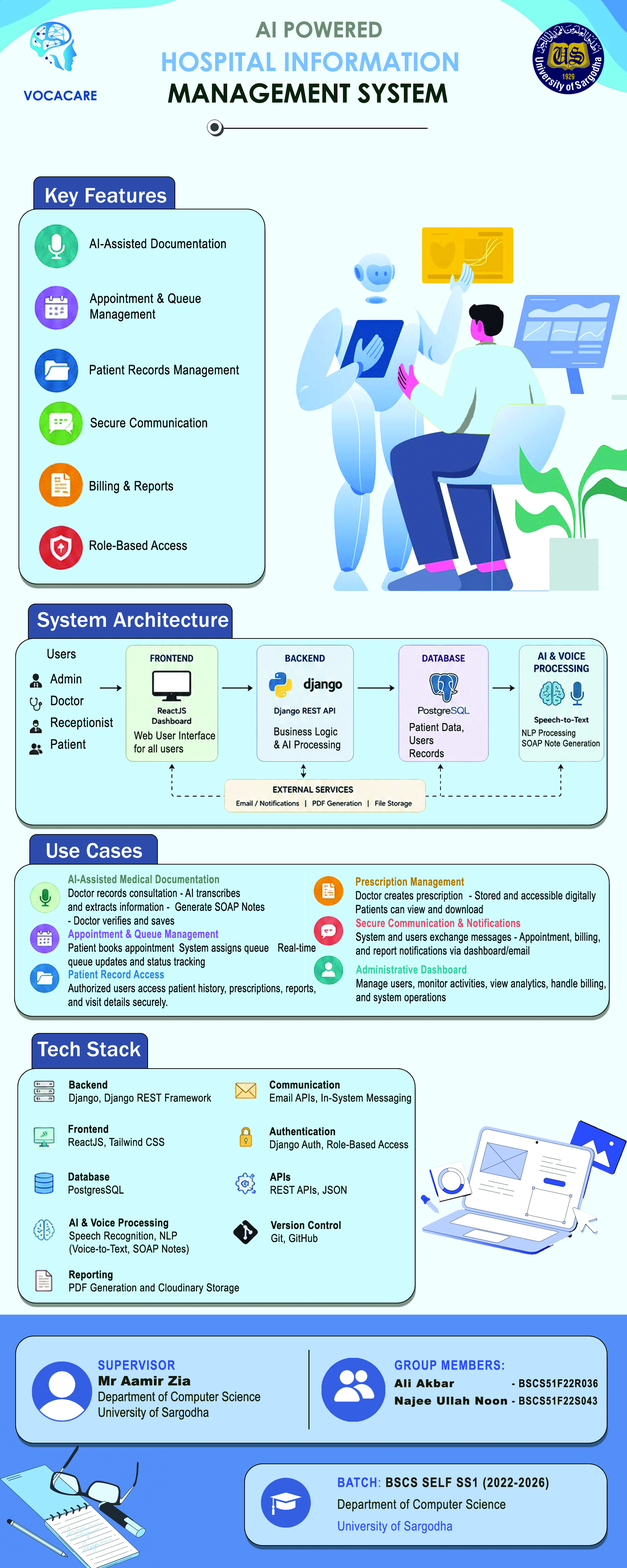
<style>
.page{position:relative;width:627px;height:1568px;background:#f2ffff}
.page>*{position:absolute;margin:0}
.t1{font:21.8px "CenturyGothic-Bold";letter-spacing:-0.006em;color:#6d8c76;font-variant:small-caps}
.t2{font:26.1px "CenturyGothic-Bold";letter-spacing:-0.006em;color:#7ac2ff;font-variant:small-caps}
.t3{font:26.1px "CenturyGothic-Bold";letter-spacing:-0.006em;color:#09200c;font-variant:small-caps}
.t4{font:13.1px "CenturyGothic-Bold";letter-spacing:-0.006em;color:#0a40cb;font-variant:small-caps}
.t5{font:21.8px "FranklinGothic-Medium";letter-spacing:0.01em;color:#f4feff}
.t6{font:13.1px "ArialNarrow";letter-spacing:0.025em;color:#060808}
.t7{font:13.1px/21.8px "ArialNarrow";letter-spacing:0.025em;color:#060808}
.t8{font:10.9px "ArialNarrow";letter-spacing:0.025em;color:#0a100b}
.t9{font:8.7px "ArialNarrow";letter-spacing:0.025em;color:#0a100b}
.t10{font:11.5px "ArialNarrow";letter-spacing:0.025em;color:#060808;scale:0.89 1}
.t11{font:11.5px "ArialNarrow-Bold";letter-spacing:0.025em;color:#518a5f;scale:0.89 1}
.t12{font:11.5px "ArialNarrow";letter-spacing:0.025em;color:#070b0c;scale:0.89 1}
.t13{font:11.5px "ArialNarrow-Bold";letter-spacing:0.025em;color:#ae7900;scale:0.89 1}
.t14{font:11.5px "ArialNarrow-Bold";letter-spacing:0.025em;color:#7c50ff;scale:0.89 1}
.t15{font:11.5px "ArialNarrow-Bold";letter-spacing:0.025em;color:#e94a69;scale:0.89 1}
.t16{font:11.5px "ArialNarrow-Bold";letter-spacing:0.025em;color:#34d09f;scale:0.89 1}
.t17{font:11.5px "ArialNarrow-Bold";letter-spacing:0.025em;color:#2b89e2;scale:0.89 1}
.t18{font:10.9px/13.1px "ArialNarrow";letter-spacing:0.025em;color:#0a100b}
.t19{font:10.9px/13.1px "ArialNarrow-Bold";letter-spacing:0.025em;color:#0a100b}
.t20{font:13.1px "ArialNarrow";letter-spacing:0.01em;color:#141b0c}
.t21{font:13.1px "ArialNarrow-Bold";letter-spacing:0.06em;color:#2a4cff;text-transform:uppercase}
.t22{font:13.1px "Arial-Black";letter-spacing:0.01em;color:#141b0c}
.t23{font:10.9px/17.4px "Arial-Black";letter-spacing:0.06em;color:#17180c}
.t24{font:13.1px/17.4px "ArialNarrow-Bold";letter-spacing:0.06em;color:#2a4bff;text-transform:uppercase}
.t25{font:10.9px/17.4px "ArialNarrow-Bold";letter-spacing:0.06em;color:#17180c}
.t26{font:10.9px/17.4px "ArialNarrow-Bold";letter-spacing:0.06em;color:#10110c}
.t27{font:13.1px/21.8px "ArialNarrow";letter-spacing:0.025em;color:#141b0c}
.t28{font:13.1px "ArialNarrow-Bold";letter-spacing:0.06em;color:#2a4bff;text-transform:uppercase}
.t29{font:13.1px "ArialNarrow";letter-spacing:0.06em;color:#2a4bff;text-transform:uppercase}
.t30{font:13.1px "ArialNarrow-Bold";letter-spacing:0.06em;color:#17180c;text-transform:uppercase}
.t31{font:13.1px/21.8px "ArialNarrow";letter-spacing:0.025em;color:#2a4bff}
</style>
<div class="page">
<p class="t1" style="left:256px;top:21px;width:126px;height:17px">AI POWERED</p>
<p class="t2" style="left:162px;top:52px;width:296px;height:51px">HOSPITAL INFORMATION<br><span class="t3"> MANAGEMENT SYSTEM</span></p>
<p class="t4" style="left:24px;top:90px;width:73px;height:11px">VOCACARE</p>
<p class="t5" style="left:46px;top:188px;width:121px;height:19px">Key Features</p>
<p class="t6" style="left:89px;top:238px;width:137px;height:10px">AI-Assisted Documentation</p>
<p class="t6" style="left:90px;top:293px;width:111px;height:29px">Appointment &amp; Queue<br>Management</p>
<p class="t6" style="left:90px;top:365px;width:149px;height:12px">Patient Records Management</p>
<p class="t6" style="left:90px;top:417px;width:117px;height:11px">Secure Communication</p>
<p class="t6" style="left:90px;top:481px;width:83px;height:12px">Billing &amp; Reports</p>
<p class="t6" style="left:90px;top:540px;width:97px;height:10px">Role-Based Access</p>
<p class="t5" style="left:37px;top:612px;width:191px;height:19px">System Architecture</p>
<p class="t6" style="left:48px;top:649px;width:28px;height:10px">Users</p>
<p class="t7" style="left:50px;top:674px;width:63px;height:75px">Admin<br>Doctor<br>Receptionist<br>Patient</p>
<p class="t8" style="left:410px;top:723px;width:54px;height:35px">Patient Data, <br>Users<br>Records</p>
<p class="t8" style="left:134px;top:731px;width:81px;height:22px">Web User Interface <br>for all users</p>
<p class="t8" style="left:274px;top:727px;width:66px;height:24px">Business Logic <br>&amp; AI Processing</p>
<p class="t9" style="left:522px;top:730px;width:78px;height:17px">NLP Processing <br>SOAP Note Generation</p>
<p class="t5" style="left:47px;top:843px;width:95px;height:15px">Use Cases</p>
<p class="t10" style="left:68px;top:875px;width:197px;height:50px"><span class="t11">AI-Assisted Medical Documentation<br></span>Doctor records consultation - AI transcribes <br>and extracts information -  Generate SOAP Notes <br>- Doctor verifies and saves</p>
<p class="t12" style="left:356px;top:877px;width:240px;height:37px"><span class="t13">Prescription Management<br></span>Doctor creates prescription  - Stored and accessible digitally<br>Patients can view and download</p>
<p class="t10" style="left:68px;top:929px;width:248px;height:39px"><span class="t14">Appointment &amp; Queue Management<br></span>Patient books appointment System assigns queue Real-time<br>queue updates and status tracking</p>
<p class="t10" style="left:356px;top:918px;width:244px;height:39px"><span class="t15">Secure Communication &amp; Notifications<br></span>System and users exchange messages - Appointment, billing,<br>and report notifications via dashboard/email</p>
<p class="t10" style="left:356px;top:965px;width:250px;height:39px"><span class="t16">Administrative Dashboard<br></span>Manage users, monitor activities, view analytics, handle billing,<br>and system operations</p>
<p class="t10" style="left:68px;top:970px;width:247px;height:38px"><span class="t17">Patient Record Access<br></span>Authorized users access patient history, prescriptions, reports,<br>and visit details securely.</p>
<p class="t5" style="left:37px;top:1041px;width:104px;height:16px">Tech Stack</p>
<p class="t18" style="left:69px;top:1081px;width:142px;height:23px"><span class="t19">Backend<br></span>Django, Django REST Framework</p>
<p class="t18" style="left:270px;top:1081px;width:141px;height:23px"><span class="t19">Communication<br></span>Email APIs, In-System Messaging</p>
<p class="t18" style="left:69px;top:1125px;width:95px;height:23px"><span class="t19">Frontend<br></span>ReactJS, Tailwind CSS</p>
<p class="t18" style="left:269px;top:1127px;width:139px;height:24px"><span class="t19">Authentication<br></span>Django Auth, Role-Based Access</p>
<p class="t18" style="left:69px;top:1172px;width:55px;height:24px"><span class="t19">Database<br></span>PostgresSQL</p>
<p class="t18" style="left:270px;top:1173px;width:77px;height:23px"><span class="t19">APIs<br></span>REST APIs, JSON</p>
<p class="t18" style="left:69px;top:1218px;width:120px;height:37px"><span class="t19">AI &amp; Voice Processing<br></span>Speech Recognition, NLP<br>(Voice-to-Text, SOAP Notes)</p>
<p class="t19" style="left:271px;top:1221px;width:70px;height:23px">Version Control<br><span class="t18">Git, GitHub</span></p>
<p class="t18" style="left:69px;top:1270px;width:170px;height:24px"><span class="t19">Reporting <br></span>PDF Generation and Cloudinary Storage</p>
<p class="t20" style="left:98px;top:1360px;width:163px;height:60px"><span class="t21">Supervisor<br></span><span class="t22">Mr Aamir Zia<br></span>Department of Computer Science<br>University of Sargodha</p>
<p class="t23" style="left:394px;top:1360px;width:204px;height:47px"><span class="t24">Group members:<br></span>Ali Akbar <span class="t25">     - </span><span class="t26">BSCS51F22R036  <br></span>Najee Ullah Noon<span class="t25"> - BSCS51F22S043</span></p>
<p class="t27" style="left:338px;top:1477px;width:211px;height:57px"><span class="t28">Batch</span><span class="t29">: </span><span class="t30">BSCS SElF SS1 (2022-2026)<br></span>Department of Computer Science<br><span class="t31">University of Sargodha</span></p>
</div>
